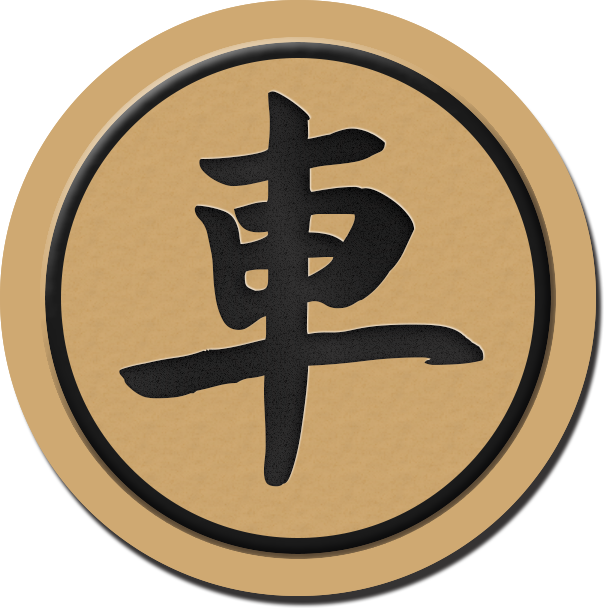
<style>
.page{position:relative;width:604px;height:608px;background:#ffffff}
.page>*{position:absolute;margin:0}
.t1{font:416.7px "AaYuwenlaoshidezi";letter-spacing:0.04em;color:#1b1b1b}
</style>
<div class="page">
<p class="t1" style="left:119px;top:91px;width:365px;height:396px">車</p>
<p class="t1" style="left:119px;top:91px;width:365px;height:396px">車</p>
<p class="t1" style="left:119px;top:91px;width:365px;height:396px">車</p>
<p class="t1" style="left:119px;top:91px;width:365px;height:396px">車</p>
<p class="t1" style="left:119px;top:91px;width:365px;height:396px">車</p>
</div>
